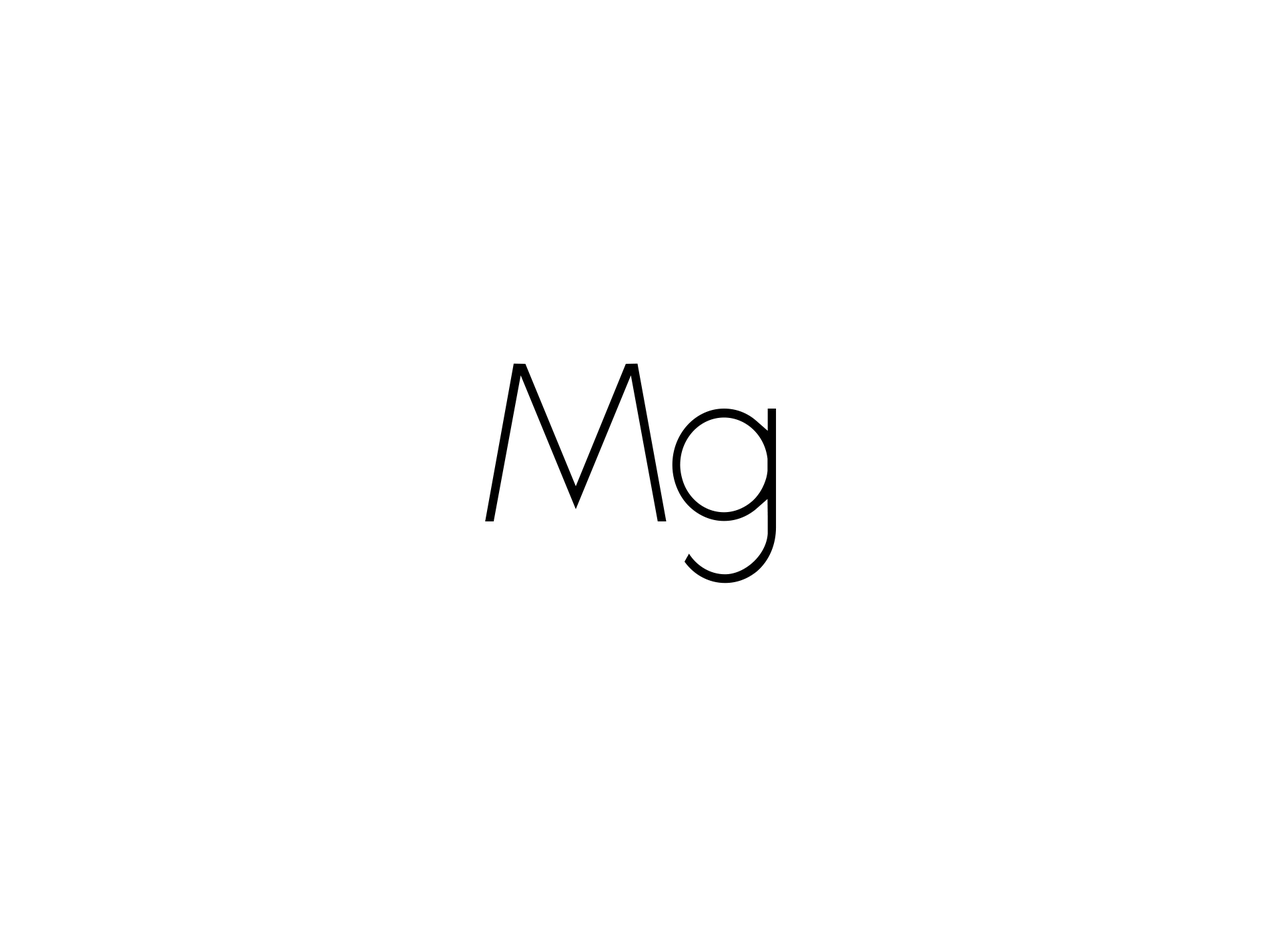
<style>
.page{position:relative;width:1261px;height:946px;background:#ffffff}
.page>*{position:absolute;margin:0}
.t1{font:222.4px "Alcubierre";color:#000000;scale:0.95 1}
</style>
<div class="page">
<p class="t1" style="left:485px;top:363px;width:292px;height:220px">Mg</p>
</div>
